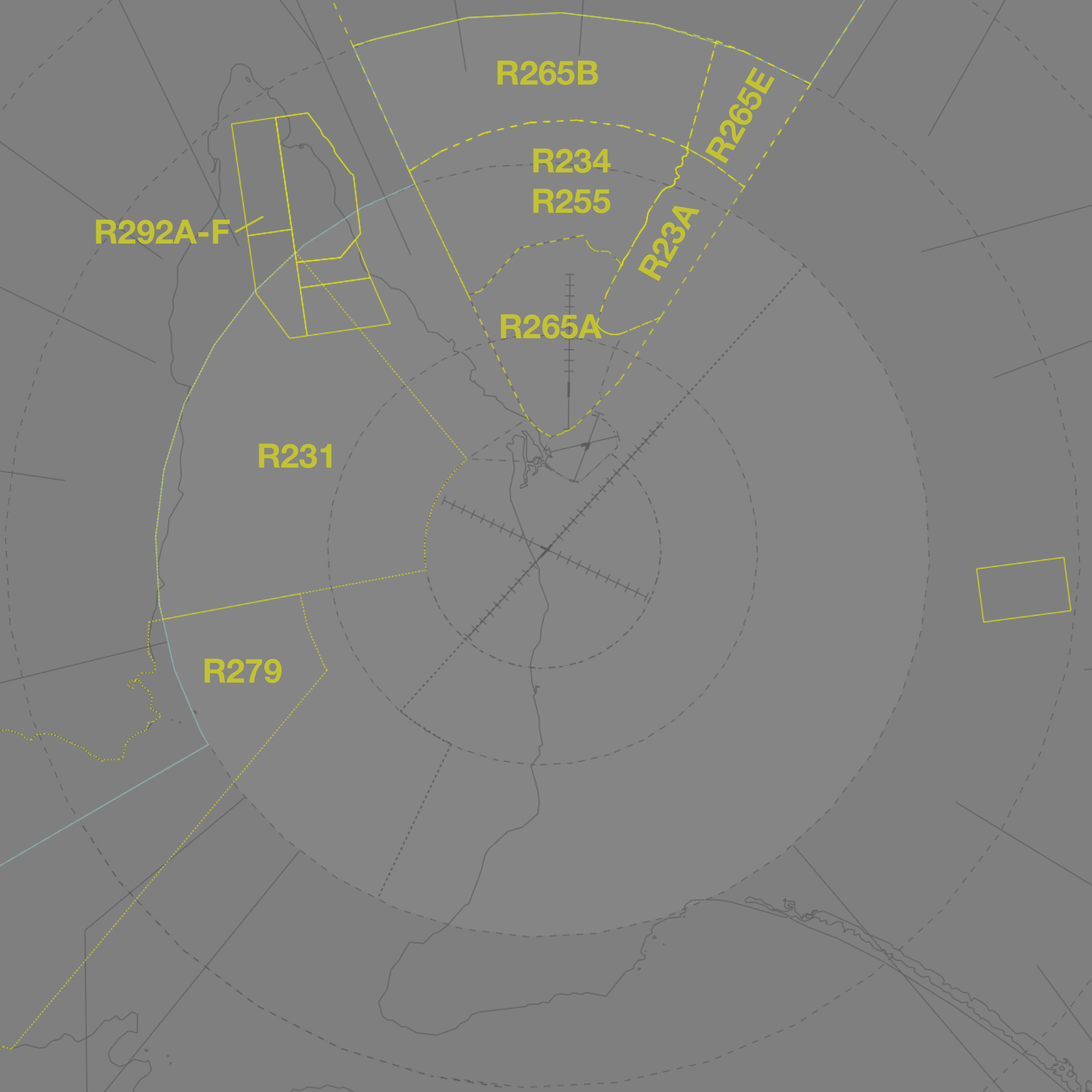
<style>
.page{position:relative;width:1092px;height:1092px;background:#7f7f7f}
.page>*{position:absolute;margin:0}
.t1{font:33.6px "HelveticaNeue-Bold";color:#c2c231}
</style>
<div class="page">
<p class="t1" style="left:497px;top:60px;width:101px;height:25px">R265B</p>
<p class="t1" style="left:705px;top:67px;width:70px;height:97px;rotate:-60deg">R265E</p>
<p class="t1" style="left:533px;top:148px;width:78px;height:65px;text-align:center">R234<br>R255</p>
<p class="t1" style="left:638px;top:206px;width:62px;height:75px;rotate:-60deg">R23A</p>
<p class="t1" style="left:96px;top:220px;width:134px;height:24px">R292A-F</p>
<p class="t1" style="left:501px;top:314px;width:101px;height:25px">R265A</p>
<p class="t1" style="left:259px;top:444px;width:73px;height:24px">R231</p>
<p class="t1" style="left:204px;top:659px;width:78px;height:24px">R279</p>
</div>
